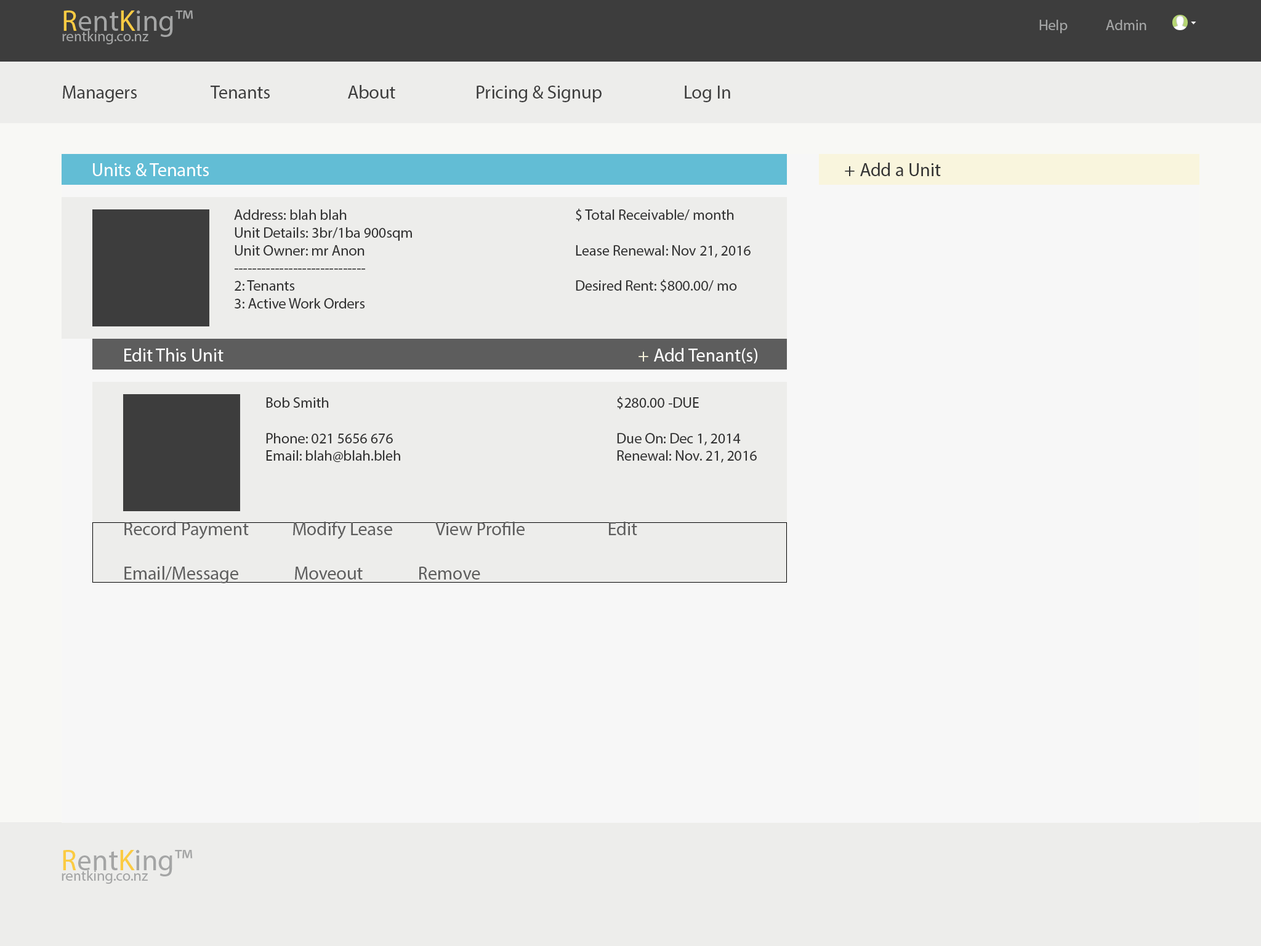
<style>
.page{position:relative;width:1261px;height:946px;background:#f7f7f7}
.page>*{position:absolute;margin:0}
.t1{font:14.8px "MyriadPro-Regular";color:#a4a5a5}
.t2{font:18.5px "MyriadPro-Regular";color:#3d3d3d}
.t3{font:18.5px "MyriadPro-Regular";color:#ffffff}
.t4{font:18.5px "MyriadPro-Regular";color:#333333}
.t5{font:14.8px "MyriadPro-Regular";color:#333333}
.t6{font:18.5px "MyriadPro-Regular";color:#f9f5dd}
.t7{font:18.5px "MyriadPro-Regular";color:#5d5d5d}
</style>
<div class="page">
<p class="t1" style="left:1039px;top:20px;width:29px;height:13px">Help</p>
<p class="t1" style="left:1106px;top:20px;width:40px;height:10px">Admin</p>
<p class="t2" style="left:63px;top:86px;width:74px;height:16px">Managers</p>
<p class="t2" style="left:211px;top:86px;width:59px;height:13px">Tenants</p>
<p class="t2" style="left:348px;top:85px;width:47px;height:14px">About</p>
<p class="t2" style="left:477px;top:86px;width:125px;height:16px">Pricing &amp; Signup</p>
<p class="t2" style="left:685px;top:86px;width:45px;height:16px">Log In</p>
<p class="t3" style="left:93px;top:163px;width:116px;height:13px">Units &amp; Tenants</p>
<p class="t4" style="left:845px;top:163px;width:96px;height:13px">+ Add a Unit</p>
<p class="t5" style="left:234px;top:209px;width:178px;height:99px">Address: blah blah<br>Unit Details: 3br/1ba 900sqm<br>Unit Owner: mr Anon<br>-----------------------------<br>2: Tenants<br>3: Active Work Orders</p>
<p class="t5" style="left:576px;top:208px;width:175px;height:84px">$ Total Receivable/ month<br><br>Lease Renewal: Nov 21, 2016<br><br>Desired Rent: $800.00/ mo</p>
<p class="t3" style="left:124px;top:348px;width:99px;height:13px">Edit This Unit</p>
<p class="t3" style="left:638px;top:348px;width:119px;height:15px"><span class="t6">+ </span>Add Tenant(s)</p>
<p class="t5" style="left:266px;top:397px;width:134px;height:65px">Bob Smith<br><br>Phone: 021 5656 676<br>Email: blah@blah.bleh</p>
<p class="t5" style="left:617px;top:396px;width:140px;height:67px">$280.00 -DUE<br><br>Due On: Dec 1, 2014<br>Renewal: Nov. 21, 2016</p>
<p class="t7" style="left:124px;top:521px;width:513px;height:62px">Record Payment           Modify Lease           View Profile                     Edit<br><br>Email/Message              Moveout              Remove</p>
</div>
